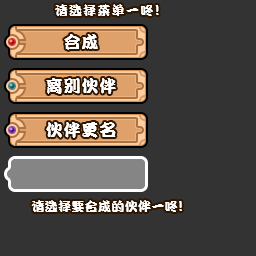
<style>
.page{position:relative;width:256px;height:256px;background:#333333}
.page>*{position:absolute;margin:0}
.t1{font:13px "DFPKanTingLiuW9";letter-spacing:0.1em;color:#ffffff}
.t2{font:15px "DFPKanTingLiuW9";letter-spacing:0.1em;color:#ffffff}
.t3{font:17px "DFPKanTingLiuW9";letter-spacing:0.05em;color:#ffffff}
.t4{font:13px "DFPKanTingLiuW9";letter-spacing:0.025em;color:#ffffff}
.t5{font:15px "DFPKanTingLiuW9";letter-spacing:0.025em;color:#ffffff}
</style>
<div class="page">
<p class="t1" style="left:55px;top:4px;width:104px;height:12px">请选择菜单一咚<span class="t2">!</span></p>
<p class="t3" style="left:64px;top:34px;width:34px;height:16px">合成</p>
<p class="t3" style="left:46px;top:78px;width:70px;height:16px">离别伙伴</p>
<p class="t3" style="left:46px;top:122px;width:70px;height:16px">伙伴更名</p>
<p class="t4" style="left:31px;top:200px;width:151px;height:12px">请选择要合成的伙伴一咚<span class="t5">!</span></p>
</div>
